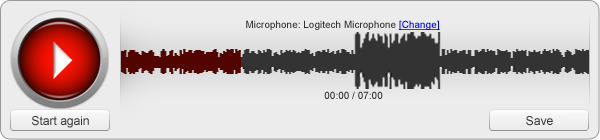
<style>
.page{position:relative;width:600px;height:140px;background:#ececec}
.page>*{position:absolute;margin:0}
.t1{font:10px "ArialMT";color:#333333}
.t2{font:10px "ArialMT";color:#0000ff;text-decoration:underline}
.t3{font:12px "ArialMT";color:#333333}
</style>
<div class="page">
<p class="t1" style="left:246px;top:20px;width:194px;height:10px">Microphone: Logitech Microphone <span class="t2">[Change]</span></p>
<p class="t1" style="left:324px;top:91px;width:59px;height:8px">00:00 / 07:00</p>
<p class="t3" style="left:32px;top:116px;width:57px;height:12px">Start again</p>
<p class="t3" style="left:526px;top:116px;width:27px;height:10px">Save</p>
</div>
